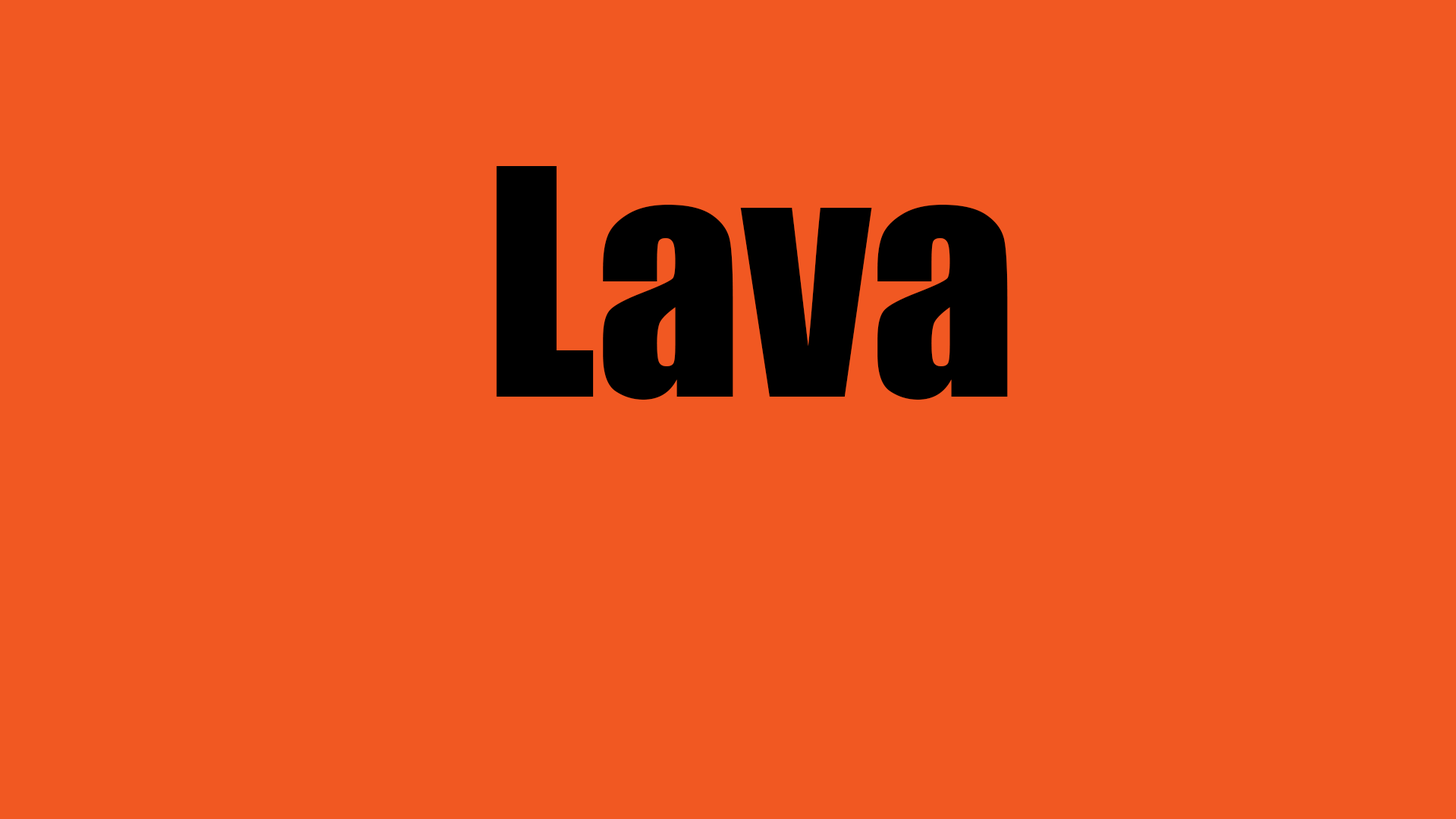
<style>
.page{position:relative;width:1456px;height:819px;background:#f15822}
.page>*{position:absolute;margin:0}
.t1{font:291.4px "Impact";color:#000000}
</style>
<div class="page">
<p class="t1" style="left:496px;top:166px;width:512px;height:234px">Lava</p>
</div>
